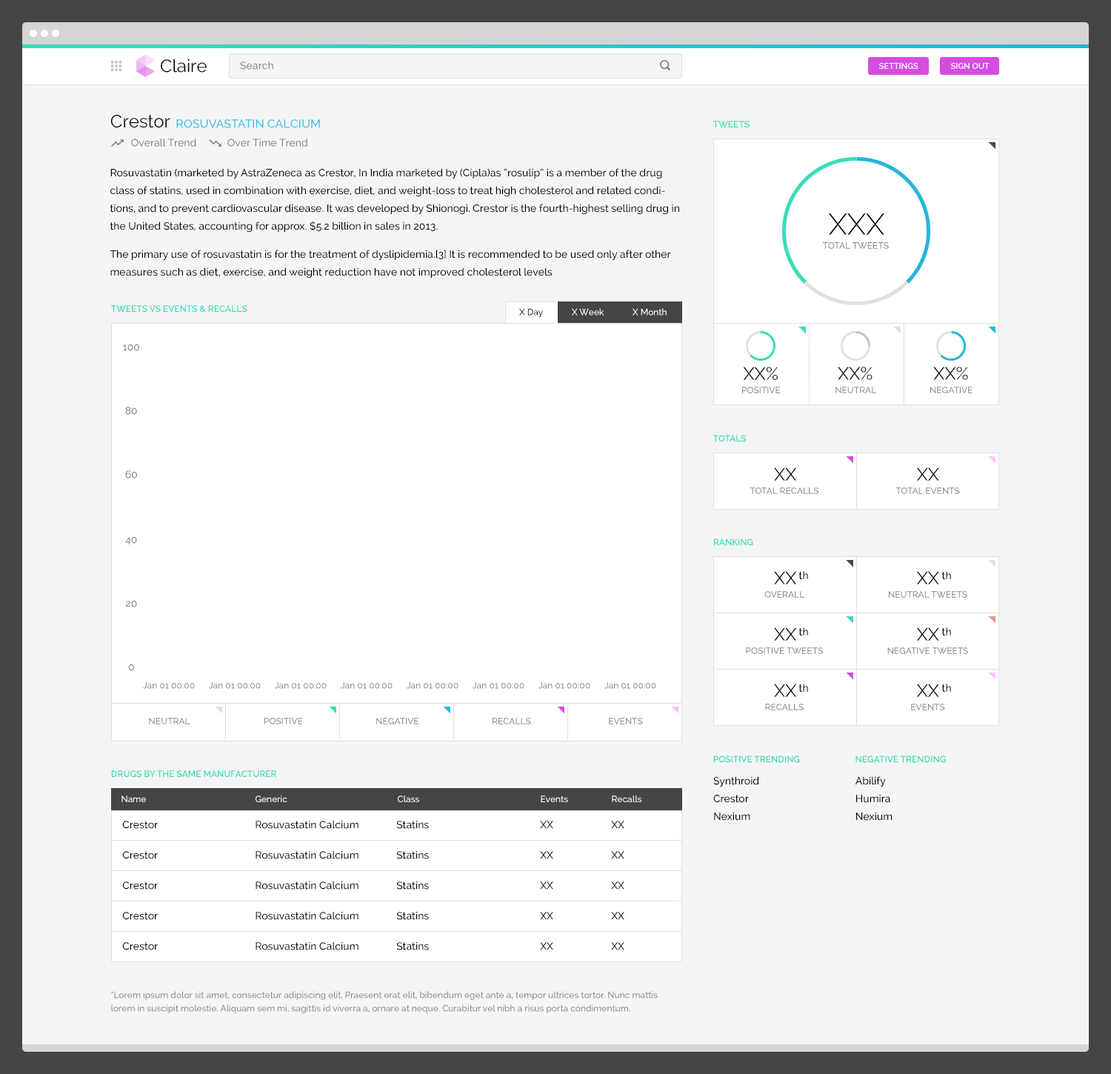
<style>
.page{position:relative;width:1111px;height:1074px;background:#f5f5f5}
.page>*{position:absolute;margin:0}
.t1{font:17.8px "Raleway-Regular";color:#000000}
.t2{font:10.4px "Raleway-Medium";color:#858585}
.t3{font:8.1px "Raleway-SemiBold";color:#ffffff;text-transform:uppercase}
.t4{font:11.8px "Raleway-Medium";color:#36bee9;text-transform:uppercase}
.t5{font:8.9px "Raleway-SemiBold";color:#3adcb8;text-transform:uppercase}
.t6{font:10.4px/17.8px "Raleway-Medium";color:#000000}
.t7{font:29.8px "Raleway-Light";color:#000000}
.t8{font:8.9px "Raleway-Medium";color:#858585;text-transform:uppercase}
.t9{font:8.9px "Raleway-SemiBold";color:#39dcb9;text-transform:uppercase}
.t10{font:8.9px "Raleway-Medium";color:#000000}
.t11{font:8.9px "Raleway-Medium";color:#ffffff}
.t12{font:17.7px "Raleway-Regular";color:#000000}
.t13{font:8.8px "Raleway-Medium";color:#858585;text-transform:uppercase}
.t14{font:8.9px "Raleway-SemiBold";color:#39dbb9;text-transform:uppercase}
.t15{font:10.4px "Raleway-Medium";color:#000000}
.t16{font:8.9px "Raleway-Medium";color:#858585}
.t17{font:8.9px/13.3px "Raleway-Medium";color:#858585}
</style>
<div class="page">
<p class="t1" style="left:161px;top:58px;width:46px;height:15px">Claire</p>
<p class="t2" style="left:240px;top:61px;width:33px;height:9px">Search</p>
<p class="t3" style="left:879px;top:63px;width:39px;height:6px">Settings</p>
<p class="t3" style="left:951px;top:63px;width:38px;height:6px">Sign Out</p>
<p class="t1" style="left:110px;top:115px;width:60px;height:13px">Crestor</p>
<p class="t4" style="left:176px;top:119px;width:144px;height:9px">Rosuvastatin Calcium</p>
<p class="t5" style="left:713px;top:121px;width:36px;height:6px">Tweets</p>
<p class="t2" style="left:131px;top:138px;width:65px;height:9px">Overall Trend</p>
<p class="t2" style="left:227px;top:138px;width:81px;height:9px">Over Time Trend</p>
<p class="t6" style="left:110px;top:168px;width:569px;height:110px">Rosuvastatin (marketed by AstraZeneca as Crestor, In India marketed by (Cipla)as “rosulip” is a member of the drug class of statins, used in combination with exercise, diet, and weight-loss to treat high cholesterol and related conditions, and to prevent cardiovascular disease. It was developed by Shionogi. Crestor is the fourth-highest selling drug in the United States, accounting for approx. $5.2 billion in sales in 2013.<br><br>The primary use of rosuvastatin is for the treatment of dyslipidemia.[3] It is recommended to be used only after other measures such as diet, exercise, and weight reduction have not improved cholesterol levels</p>
<p class="t7" style="left:828px;top:213px;width:56px;height:22px">XXX</p>
<p class="t8" style="left:822px;top:242px;width:67px;height:7px">Total Tweets</p>
<p class="t9" style="left:111px;top:305px;width:136px;height:7px">Tweets vs events &amp; recalls</p>
<p class="t10" style="left:519px;top:308px;width:24px;height:10px">X Day</p>
<p class="t11" style="left:572px;top:308px;width:32px;height:7px">X Week</p>
<p class="t11" style="left:632px;top:308px;width:34px;height:7px">X Month</p>
<p class="t2" style="left:123px;top:344px;width:16px;height:7px">100</p>
<p class="t1" style="left:743px;top:367px;width:34px;height:13px">XX%</p>
<p class="t12" style="left:837px;top:367px;width:35px;height:13px">XX%</p>
<p class="t12" style="left:933px;top:367px;width:35px;height:13px">XX%</p>
<p class="t8" style="left:742px;top:387px;width:38px;height:6px">Positive</p>
<p class="t13" style="left:835px;top:387px;width:41px;height:6px">Neutral</p>
<p class="t13" style="left:930px;top:387px;width:42px;height:6px">Negative</p>
<p class="t2" style="left:125px;top:406px;width:12px;height:9px">80</p>
<p class="t14" style="left:713px;top:435px;width:33px;height:7px">Totals</p>
<p class="t2" style="left:125px;top:470px;width:12px;height:8px">60</p>
<p class="t12" style="left:774px;top:467px;width:23px;height:14px">XX</p>
<p class="t12" style="left:916px;top:467px;width:23px;height:14px">XX</p>
<p class="t13" style="left:749px;top:487px;width:69px;height:7px">Total Recalls</p>
<p class="t13" style="left:895px;top:487px;width:65px;height:7px">Total Events</p>
<p class="t2" style="left:125px;top:536px;width:12px;height:8px">40</p>
<p class="t5" style="left:713px;top:538px;width:40px;height:8px">Ranking</p>
<p class="t12" style="left:774px;top:571px;width:23px;height:13px">XX</p>
<p class="t15" style="left:798px;top:571px;width:10px;height:8px">th</p>
<p class="t12" style="left:916px;top:571px;width:23px;height:13px">XX</p>
<p class="t15" style="left:941px;top:571px;width:10px;height:8px">th</p>
<p class="t13" style="left:764px;top:591px;width:40px;height:7px">Overall</p>
<p class="t13" style="left:889px;top:591px;width:78px;height:7px">Neutral Tweets</p>
<p class="t2" style="left:125px;top:600px;width:12px;height:7px">20</p>
<p class="t12" style="left:774px;top:627px;width:23px;height:13px">XX</p>
<p class="t15" style="left:798px;top:627px;width:10px;height:8px">th</p>
<p class="t12" style="left:916px;top:627px;width:23px;height:13px">XX</p>
<p class="t15" style="left:941px;top:627px;width:10px;height:8px">th</p>
<p class="t13" style="left:746px;top:647px;width:77px;height:7px">Positive Tweets</p>
<p class="t13" style="left:887px;top:647px;width:81px;height:7px">Negative Tweets</p>
<p class="t2" style="left:128px;top:663px;width:6px;height:8px">0</p>
<p class="t16" style="left:143px;top:681px;width:52px;height:8px">Jan 01 00:00</p>
<p class="t16" style="left:209px;top:681px;width:52px;height:8px">Jan 01 00:00</p>
<p class="t16" style="left:275px;top:681px;width:52px;height:8px">Jan 01 00:00</p>
<p class="t16" style="left:341px;top:681px;width:51px;height:8px">Jan 01 00:00</p>
<p class="t16" style="left:406px;top:681px;width:52px;height:8px">Jan 01 00:00</p>
<p class="t16" style="left:472px;top:681px;width:52px;height:8px">Jan 01 00:00</p>
<p class="t16" style="left:538px;top:681px;width:52px;height:8px">Jan 01 00:00</p>
<p class="t16" style="left:604px;top:681px;width:52px;height:8px">Jan 01 00:00</p>
<p class="t12" style="left:774px;top:683px;width:23px;height:14px">XX</p>
<p class="t15" style="left:798px;top:683px;width:10px;height:9px">th</p>
<p class="t12" style="left:916px;top:683px;width:23px;height:14px">XX</p>
<p class="t15" style="left:941px;top:683px;width:10px;height:9px">th</p>
<p class="t13" style="left:765px;top:703px;width:38px;height:7px">Recalls</p>
<p class="t13" style="left:911px;top:703px;width:34px;height:7px">Events</p>
<p class="t13" style="left:149px;top:717px;width:41px;height:7px">Neutral</p>
<p class="t13" style="left:264px;top:717px;width:39px;height:7px">Positive</p>
<p class="t13" style="left:376px;top:717px;width:42px;height:7px">Negative</p>
<p class="t13" style="left:492px;top:717px;width:39px;height:7px">Recalls</p>
<p class="t13" style="left:609px;top:717px;width:34px;height:7px">Events</p>
<p class="t5" style="left:713px;top:755px;width:87px;height:8px">Positive Trending</p>
<p class="t5" style="left:855px;top:755px;width:91px;height:8px">Negative Trending</p>
<p class="t9" style="left:111px;top:770px;width:165px;height:7px">Drugs By the Same Manufacturer</p>
<p class="t6" style="left:713px;top:776px;width:46px;height:44px">Synthroid<br>Crestor<br>Nexium</p>
<p class="t6" style="left:855px;top:776px;width:37px;height:44px">Abilify<br>Humira<br>Nexium</p>
<p class="t11" style="left:121px;top:795px;width:25px;height:7px">Name</p>
<p class="t11" style="left:255px;top:795px;width:32px;height:7px">Generic</p>
<p class="t11" style="left:398px;top:795px;width:21px;height:7px">Class</p>
<p class="t11" style="left:541px;top:795px;width:27px;height:7px">Events</p>
<p class="t11" style="left:612px;top:795px;width:29px;height:7px">Recalls</p>
<p class="t15" style="left:122px;top:820px;width:36px;height:9px">Crestor</p>
<p class="t15" style="left:255px;top:820px;width:103px;height:9px">Rosuvastatin Calcium</p>
<p class="t15" style="left:396px;top:820px;width:33px;height:9px">Statins</p>
<p class="t15" style="left:540px;top:820px;width:13px;height:9px">XX</p>
<p class="t15" style="left:611px;top:820px;width:13px;height:9px">XX</p>
<p class="t15" style="left:122px;top:851px;width:36px;height:8px">Crestor</p>
<p class="t15" style="left:255px;top:851px;width:103px;height:8px">Rosuvastatin Calcium</p>
<p class="t15" style="left:396px;top:851px;width:33px;height:8px">Statins</p>
<p class="t15" style="left:540px;top:851px;width:13px;height:8px">XX</p>
<p class="t15" style="left:611px;top:851px;width:13px;height:8px">XX</p>
<p class="t15" style="left:122px;top:881px;width:36px;height:8px">Crestor</p>
<p class="t15" style="left:255px;top:881px;width:103px;height:8px">Rosuvastatin Calcium</p>
<p class="t15" style="left:396px;top:881px;width:33px;height:8px">Statins</p>
<p class="t15" style="left:540px;top:881px;width:13px;height:8px">XX</p>
<p class="t15" style="left:611px;top:881px;width:13px;height:8px">XX</p>
<p class="t15" style="left:122px;top:911px;width:36px;height:9px">Crestor</p>
<p class="t15" style="left:255px;top:911px;width:103px;height:9px">Rosuvastatin Calcium</p>
<p class="t15" style="left:396px;top:911px;width:33px;height:9px">Statins</p>
<p class="t15" style="left:540px;top:911px;width:13px;height:9px">XX</p>
<p class="t15" style="left:611px;top:911px;width:13px;height:9px">XX</p>
<p class="t15" style="left:122px;top:942px;width:36px;height:8px">Crestor</p>
<p class="t15" style="left:255px;top:942px;width:103px;height:8px">Rosuvastatin Calcium</p>
<p class="t15" style="left:396px;top:942px;width:33px;height:8px">Statins</p>
<p class="t15" style="left:540px;top:942px;width:13px;height:8px">XX</p>
<p class="t15" style="left:611px;top:942px;width:13px;height:8px">XX</p>
<p class="t17" style="left:111px;top:991px;width:547px;height:22px">*Lorem ipsum dolor sit amet, consectetur adipiscing elit. Praesent erat elit, bibendum eget ante a, tempor ultrices tortor. Nunc mattis lorem in suscipit molestie. Aliquam sem mi, sagittis id viverra a, ornare at neque. Curabitur vel nibh a risus porta condimentum.</p>
</div>
